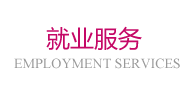
<style>
.page{position:relative;width:193px;height:95px;background:#ffffff}
.page>*{position:absolute;margin:0}
.t1{font:24px "MicrosoftYaHei";color:#c50967}
.t2{font:14px "TimesNewRomanPSMT";color:#999999;text-transform:uppercase}
</style>
<div class="page">
<p class="t1" style="left:46px;top:26px;width:96px;height:25px">就业服务</p>
<p class="t2" style="left:14px;top:58px;width:166px;height:11px">Employment services</p>
</div>
